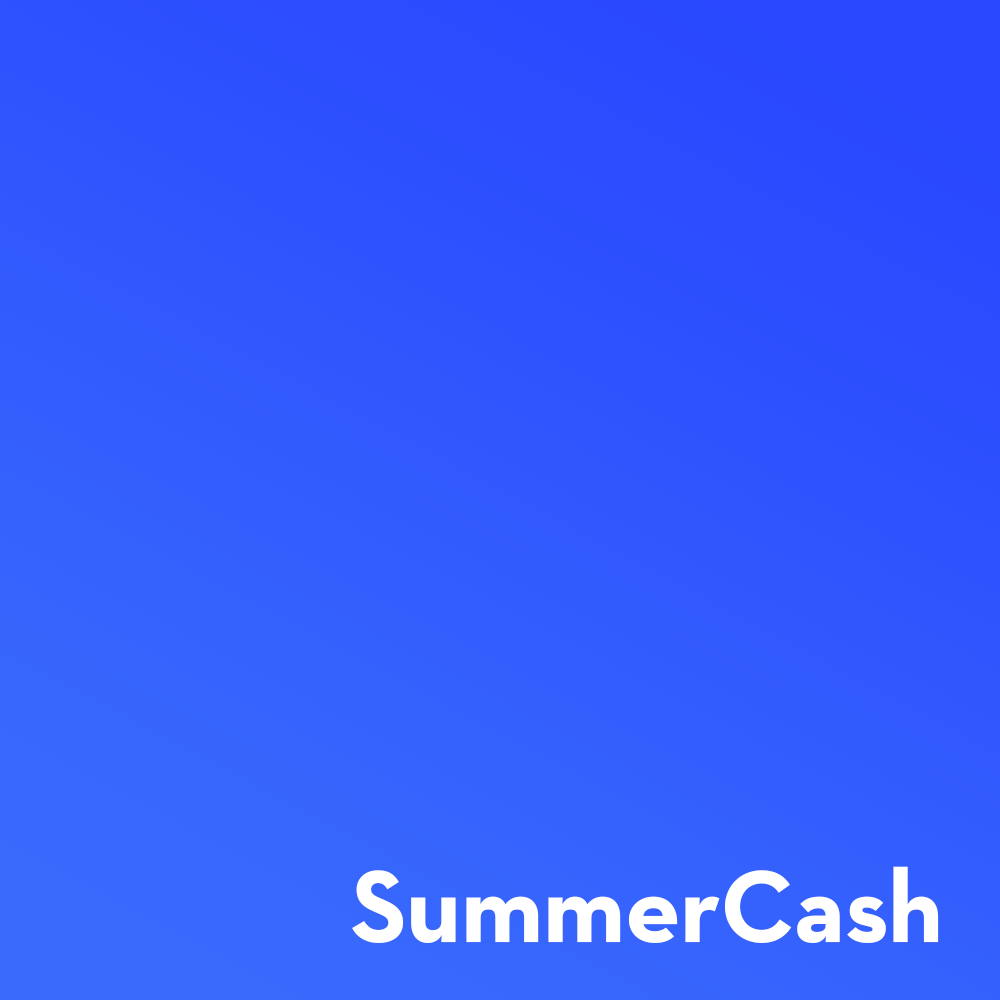
<style>
.page{position:relative;width:1000px;height:1000px}
.page>*{position:absolute;margin:0}
.t1{font:104.2px "NeutraText-Bold";letter-spacing:-0.005em;color:#ffffff}
</style>
<div class="page">
<p class="t1" style="left:352px;top:866px;width:587px;height:77px">SummerCash</p>
</div>
